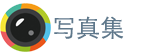
<style>
.page{position:relative;width:150px;height:55px;background:#ffffff}
.page>*{position:absolute;margin:0}
.t1{font:24px "STXihei";color:#5f788b}
</style>
<div class="page">
<p class="t1" style="left:54px;top:16px;width:70px;height:24px">写真集</p>
</div>
